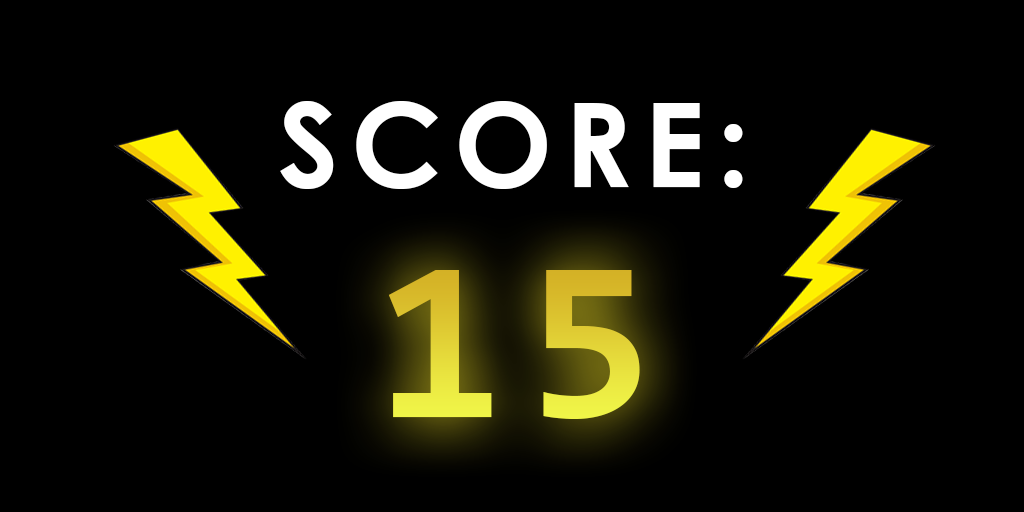
<style>
.page{position:relative;width:1024px;height:512px;background:#000000}
.page>*{position:absolute;margin:0}
.t1{font:117.2px "CenturyGothic-Bold";letter-spacing:0.1em;color:#ffffff}
.t2{font:231px "Consolas-Bold";letter-spacing:0.1em}
</style>
<div class="page">
<p class="t1" style="left:280px;top:101px;width:463px;height:88px">SCORE:</p>
<p class="t2" style="left:388px;top:270px;width:252px;height:149px">15</p>
</div>
